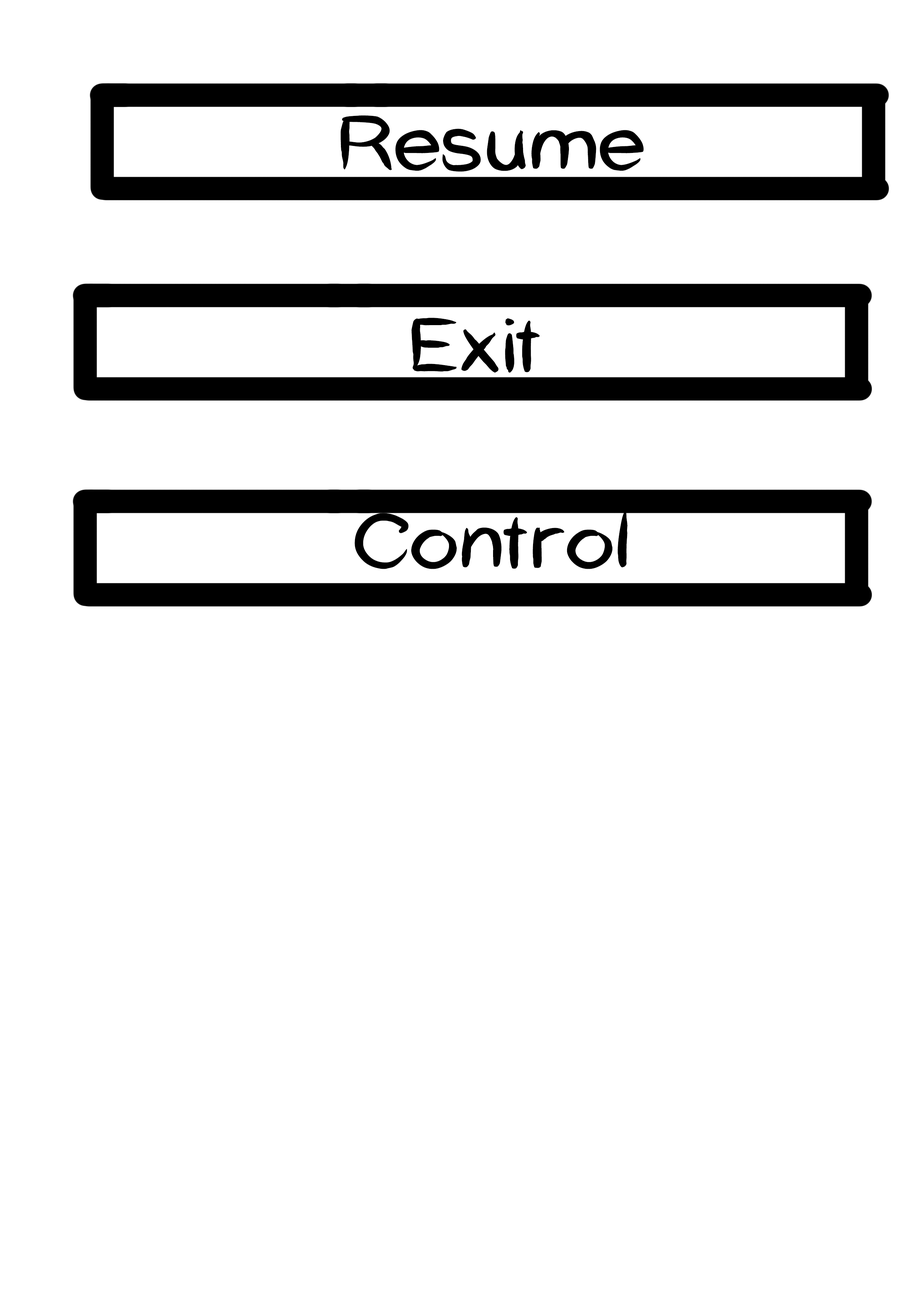
<style>
.page{position:relative;width:918px;height:1299px;background:#ffffff}
.page>*{position:absolute;margin:0}
.t1{font:74px "CatCafe";color:#000000;scale:1.2 1}
</style>
<div class="page">
<p class="t1" style="left:341px;top:115px;width:303px;height:57px">Resume</p>
<p class="t1" style="left:411px;top:318px;width:129px;height:55px">Exit</p>
<p class="t1" style="left:355px;top:511px;width:273px;height:58px">Control</p>
</div>
